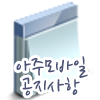
<style>
.page{position:relative;width:100px;height:100px;background:#ffffff}
.page>*{position:absolute;margin:0}
.t1{font:25px/19.9px "NanumPen";color:#4b5273}
</style>
<div class="page">
<p class="t1" style="left:16px;top:56px;width:72px;height:40px;text-align:center">아주모바일<br>공지사항</p>
</div>
